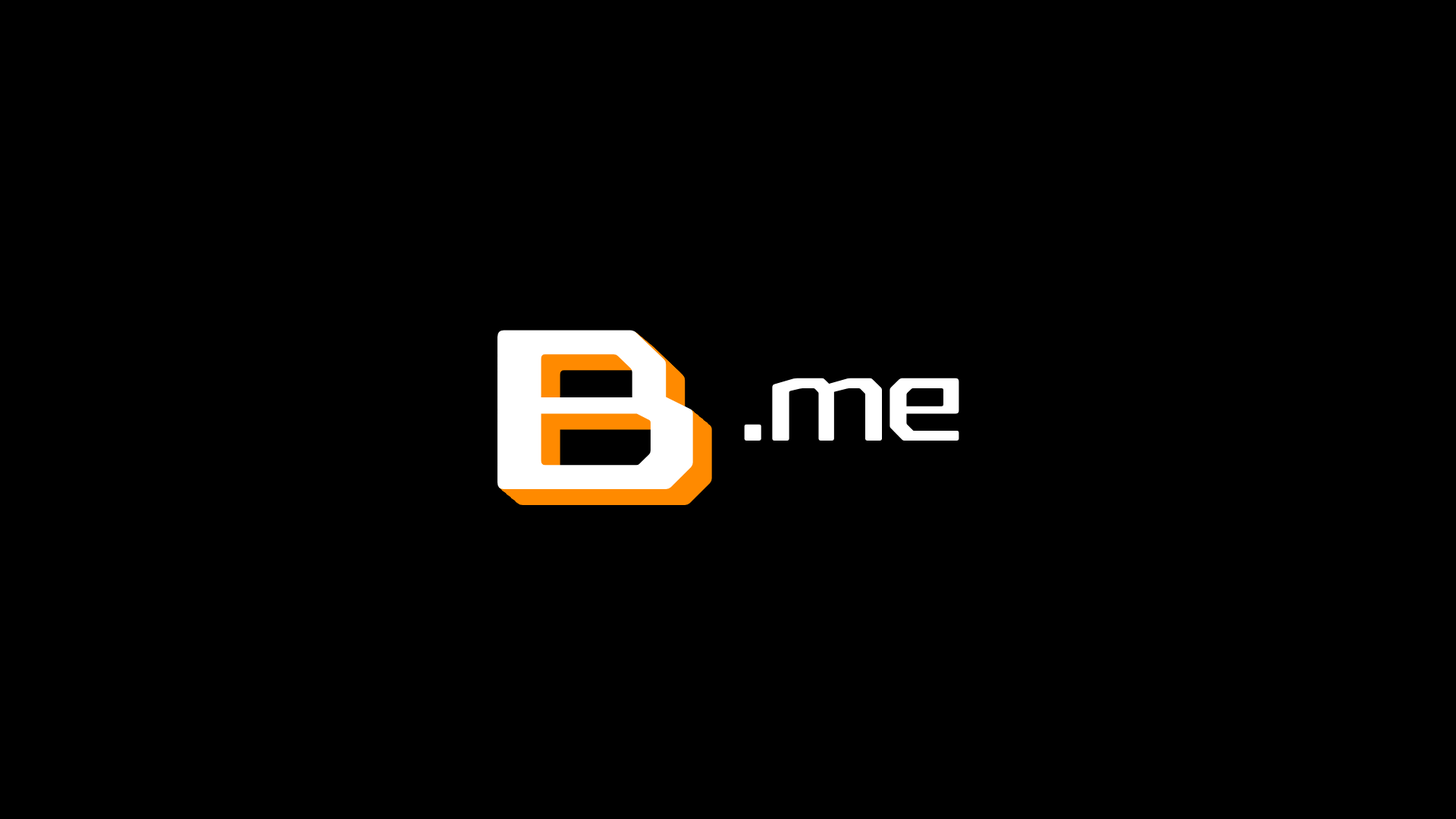
<style>
.page{position:relative;width:1456px;height:819px;background:#000000}
.page>*{position:absolute;margin:0}
.t1{font:229.9px "RexliaRg-Regular";color:#ffffff}
.t2{font:113.7px "RexliaRg-Regular";color:#ffffff}
</style>
<div class="page">
<p class="t1" style="left:497px;top:330px;width:196px;height:159px">B</p>
<p class="t2" style="left:744px;top:378px;width:215px;height:63px">.me</p>
</div>
